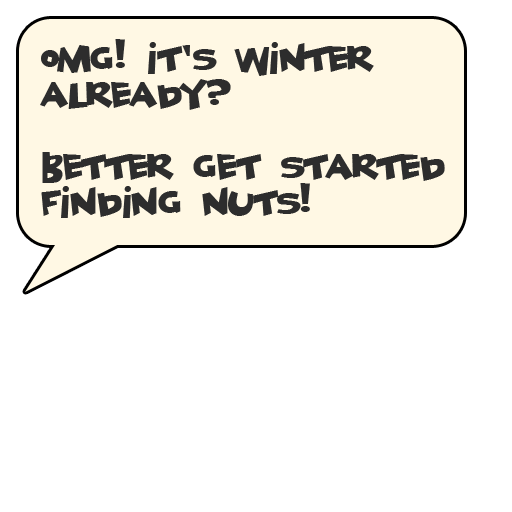
<style>
.page{position:relative;width:512px;height:512px;background:#ffffff}
.page>*{position:absolute;margin:0}
.t1{font:30px "Geekabyte2";color:#2d2d2d;scale:1.4 1}
</style>
<div class="page">
<p class="t1" style="left:40px;top:39px;width:405px;height:179px">OMG! It’s Winter<br>already?<br><br>Better get started<br>finding nuts!</p>
</div>
